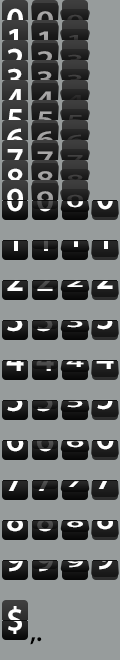
<style>
.page{position:relative;width:120px;height:660px;background:#979c9c}
.page>*{position:absolute;margin:0}
.t1{font:34px "MyriadPro-Semibold"}
.t2{font:25.5px "MyriadPro-Semibold";scale:1.33 1}
.t3{font:17px "MyriadPro-Semibold";color:#3d3d3d;scale:2 1}
.t4{font:34px "MyriadPro-Semibold";color:#ffffff}
.t5{font:17px "MyriadPro-Semibold";scale:2 1}
.t6{font:34px "MyriadPro-Semibold";color:#979c9c}
.t7{font:26px "MyriadPro-Semibold";color:#000000}
</style>
<div class="page">
<p class="t1" style="left:7px;top:8px;width:16px;height:24px">0</p>
<p class="t2" style="left:37px;top:11px;width:16px;height:18px">0</p>
<p class="t3" style="left:67px;top:14px;width:16px;height:13px">0</p>
<p class="t4" style="left:9px;top:29px;width:9px;height:22px">1</p>
<p class="t2" style="left:39px;top:31px;width:9px;height:17px">1</p>
<p class="t3" style="left:69px;top:35px;width:9px;height:11px">1</p>
<p class="t1" style="left:7px;top:48px;width:16px;height:23px">2</p>
<p class="t2" style="left:37px;top:51px;width:16px;height:17px">2</p>
<p class="t3" style="left:67px;top:54px;width:16px;height:13px">3</p>
<p class="t1" style="left:7px;top:68px;width:16px;height:24px">3</p>
<p class="t2" style="left:37px;top:71px;width:16px;height:18px">3</p>
<p class="t3" style="left:67px;top:74px;width:16px;height:13px">3</p>
<p class="t1" style="left:6px;top:89px;width:18px;height:22px">4</p>
<p class="t2" style="left:36px;top:91px;width:18px;height:17px">4</p>
<p class="t1" style="left:7px;top:109px;width:16px;height:23px">5</p>
<p class="t2" style="left:37px;top:111px;width:16px;height:18px">5</p>
<p class="t3" style="left:67px;top:115px;width:16px;height:12px">5</p>
<p class="t1" style="left:7px;top:128px;width:17px;height:24px">6</p>
<p class="t2" style="left:37px;top:131px;width:17px;height:18px">6</p>
<p class="t3" style="left:67px;top:134px;width:17px;height:13px">6</p>
<p class="t4" style="left:7px;top:149px;width:16px;height:22px">7</p>
<p class="t2" style="left:37px;top:151px;width:16px;height:17px">7</p>
<p class="t1" style="left:7px;top:168px;width:16px;height:24px">8</p>
<p class="t2" style="left:37px;top:171px;width:16px;height:18px">8</p>
<p class="t3" style="left:67px;top:174px;width:16px;height:13px">8</p>
<p class="t4" style="left:7px;top:188px;width:16px;height:24px">0</p>
<p class="t4" style="left:7px;top:188px;width:16px;height:24px">9</p>
<p class="t1" style="left:37px;top:188px;width:16px;height:24px">0</p>
<p class="t2" style="left:37px;top:191px;width:16px;height:18px">9</p>
<p class="t5" style="left:67px;top:195px;width:16px;height:13px">0</p>
<p class="t1" style="left:97px;top:186px;width:16px;height:24px">0</p>
<p class="t1" style="left:9px;top:229px;width:9px;height:22px">1</p>
<p class="t1" style="left:39px;top:229px;width:9px;height:22px">1</p>
<p class="t1" style="left:99px;top:227px;width:9px;height:22px">1</p>
<p class="t5" style="left:69px;top:236px;width:9px;height:11px">1</p>
<p class="t1" style="left:7px;top:268px;width:16px;height:23px">2</p>
<p class="t1" style="left:97px;top:266px;width:16px;height:23px">2</p>
<p class="t5" style="left:67px;top:275px;width:16px;height:12px">2</p>
<p class="t1" style="left:7px;top:308px;width:16px;height:24px">3</p>
<p class="t1" style="left:7px;top:310px;width:16px;height:23px">2</p>
<p class="t1" style="left:37px;top:310px;width:16px;height:23px">2</p>
<p class="t5" style="left:67px;top:315px;width:16px;height:13px">3</p>
<p class="t1" style="left:97px;top:306px;width:16px;height:24px">3</p>
<p class="t1" style="left:6px;top:349px;width:18px;height:22px">4</p>
<p class="t1" style="left:96px;top:347px;width:18px;height:22px">4</p>
<p class="t5" style="left:66px;top:356px;width:18px;height:11px">4</p>
<p class="t1" style="left:7px;top:389px;width:16px;height:23px">5</p>
<p class="t1" style="left:37px;top:389px;width:16px;height:23px">5</p>
<p class="t1" style="left:97px;top:387px;width:16px;height:23px">5</p>
<p class="t5" style="left:67px;top:396px;width:16px;height:12px">5</p>
<p class="t1" style="left:7px;top:428px;width:17px;height:24px">6</p>
<p class="t5" style="left:67px;top:435px;width:17px;height:13px">6</p>
<p class="t1" style="left:97px;top:426px;width:17px;height:24px">6</p>
<p class="t1" style="left:7px;top:469px;width:16px;height:22px">7</p>
<p class="t1" style="left:37px;top:469px;width:16px;height:22px">7</p>
<p class="t6" style="left:97px;top:467px;width:16px;height:22px">7</p>
<p class="t5" style="left:67px;top:476px;width:16px;height:11px">7</p>
<p class="t1" style="left:7px;top:508px;width:16px;height:24px">8</p>
<p class="t1" style="left:97px;top:506px;width:16px;height:24px">8</p>
<p class="t5" style="left:67px;top:515px;width:16px;height:13px">8</p>
<p class="t1" style="left:97px;top:512px;width:16px;height:22px">7</p>
<p class="t1" style="left:7px;top:548px;width:16px;height:24px">9</p>
<p class="t5" style="left:67px;top:555px;width:16px;height:13px">9</p>
<p class="t6" style="left:97px;top:546px;width:16px;height:24px">9</p>
<p class="t4" style="left:8px;top:606px;width:14px;height:28px">$</p>
<p class="t7" style="left:30px;top:637px;width:6px;height:8px">,</p>
<p class="t7" style="left:37px;top:637px;width:5px;height:5px">.</p>
</div>
